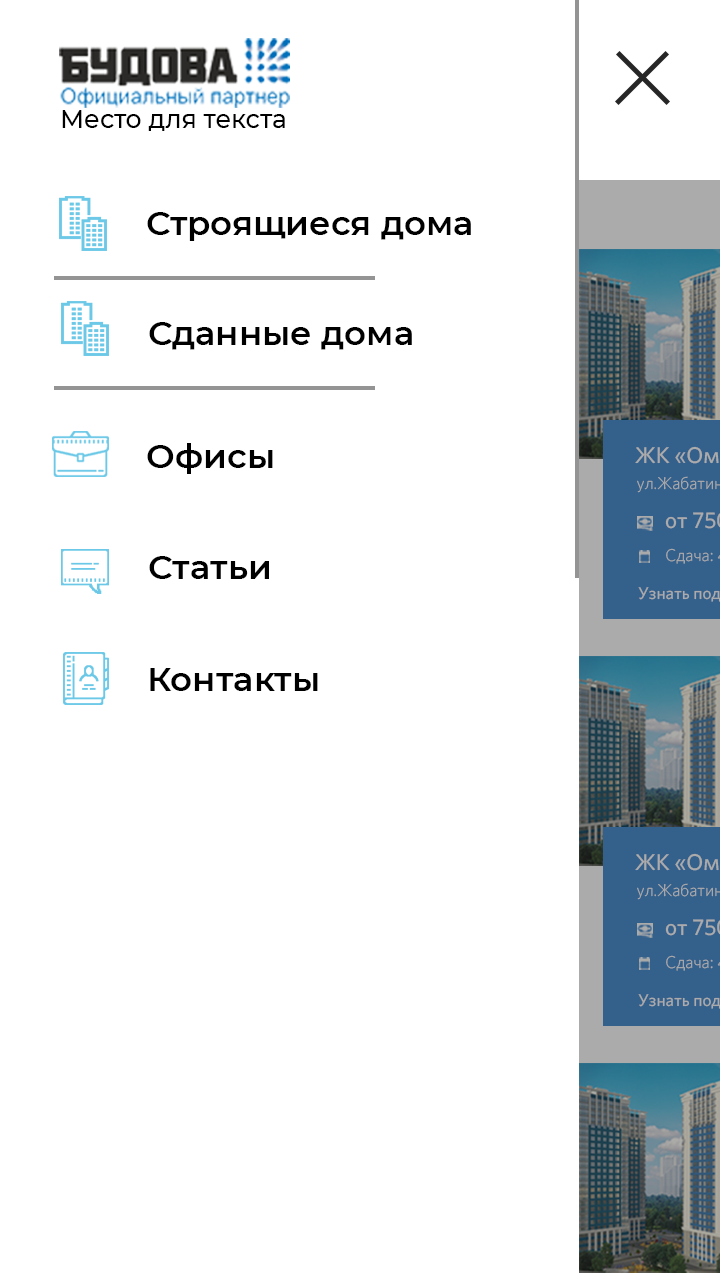
<style>
.page{position:relative;width:720px;height:1273px;background:#ffffff}
.page>*{position:absolute;margin:0}
.t1{font:25.1px "Montserrat-Medium";color:#000000}
.t2{font:34px "Montserrat-SemiBold";color:#000000}
</style>
<div class="page">
<p class="t1" style="left:62px;top:110px;width:223px;height:21px">Место для текста</p>
<p class="t2" style="left:147px;top:212px;width:324px;height:29px">Строящиеся дома</p>
<p class="t2" style="left:149px;top:322px;width:263px;height:28px">Сданные дома</p>
<p class="t2" style="left:147px;top:443px;width:126px;height:31px">Офисы</p>
<p class="t2" style="left:149px;top:556px;width:120px;height:23px">Статьи</p>
<p class="t2" style="left:150px;top:668px;width:168px;height:23px">Контакты</p>
</div>
